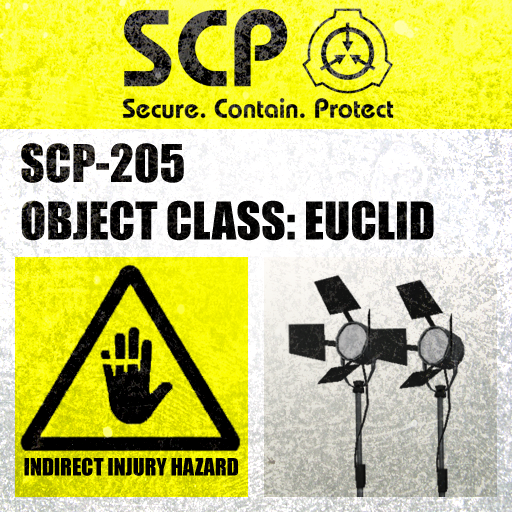
<style>
.page{position:relative;width:512px;height:512px}
.page>*{position:absolute;margin:0}
.t1{font:48px "Impact";color:#000000}
.t2{font:21.9px "Impact";color:#000000}
</style>
<div class="page">
<p class="t1" style="left:21px;top:143px;width:413px;height:98px">SCP-205<br>OBJECT CLASS: EUCLID</p>
<p class="t2" style="left:24px;top:457px;width:214px;height:19px">INDIRECT INJURY HAZARD</p>
</div>
